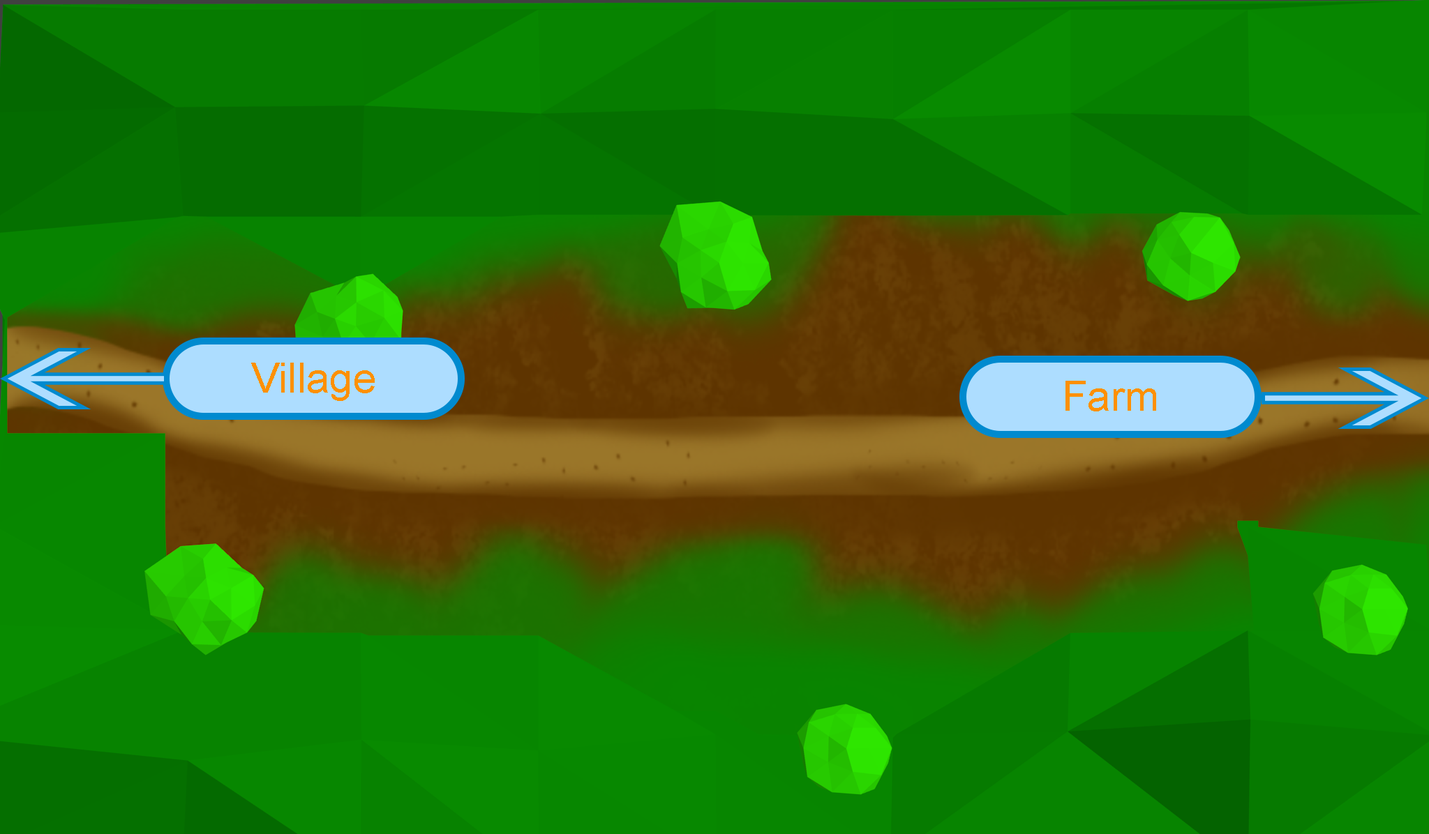
<style>
.page{position:relative;width:1429px;height:834px}
.page>*{position:absolute;margin:0}
.t1{font:41.9px "ArialMT";color:#ff9000}
</style>
<div class="page">
<p class="t1" style="left:251px;top:363px;width:124px;height:38px">Village</p>
<p class="t1" style="left:1065px;top:381px;width:91px;height:31px">Farm</p>
</div>
